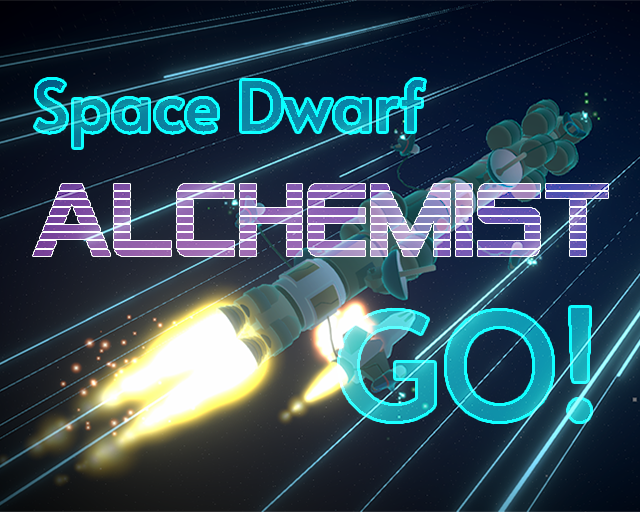
<style>
.page{position:relative;width:640px;height:512px}
.page>*{position:absolute;margin:0}
.t1{font:103.5px "AlienEncounters"}
.t2{font:145.8px "Alata-Regular";color:#1aa4b4}
</style>
<div class="page">
<p class="t1" style="left:33px;top:184px;width:575px;height:72px">Alchemist</p>
<p class="t1" style="left:33px;top:184px;width:575px;height:72px">Alchemist</p>
<p class="t2" style="left:340px;top:308px;width:250px;height:113px">GO!</p>
<p class="t2" style="left:340px;top:308px;width:250px;height:113px">GO!</p>
</div>
